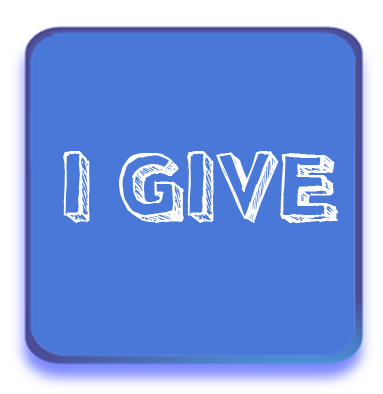
<style>
.page{position:relative;width:383px;height:394px;background:#4978d9}
.page>*{position:absolute;margin:0}
.t1{font:94.9px "Pointy";color:#fbfcfd}
</style>
<div class="page">
<p class="t1" style="left:63px;top:151px;width:276px;height:72px">I GIVE</p>
</div>
